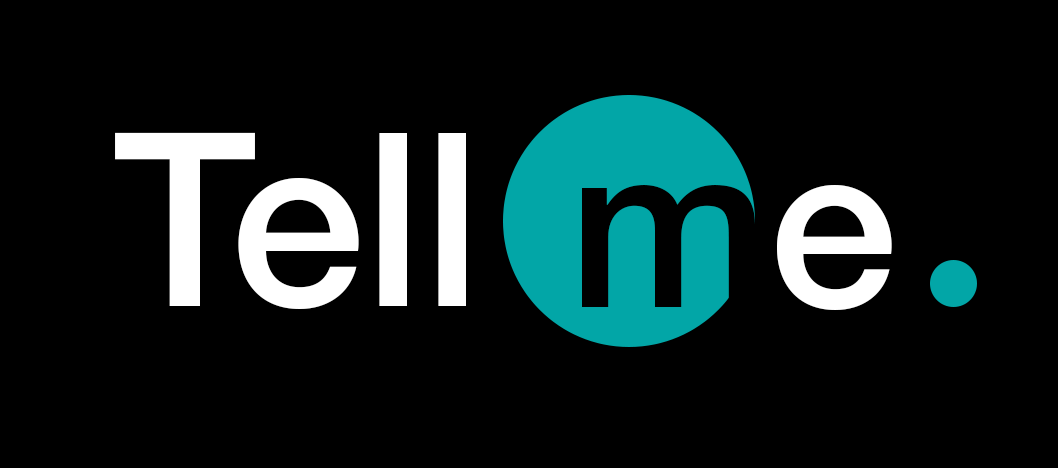
<style>
.page{position:relative;width:1058px;height:468px;background:#000000}
.page>*{position:absolute;margin:0}
.t1{font:242px "HelveticaNeueLTStd-Md";color:#ffffff}
.t2{font:231px "HelveticaNeueLTStd-Md";color:#000000}
.t3{font:231px "HelveticaNeueLTStd-Md";color:#ffffff}
</style>
<div class="page">
<p class="t1" style="left:115px;top:132px;width:351px;height:177px">Tell</p>
<p class="t2" style="left:582px;top:185px;width:310px;height:125px">m<span class="t3">e</span></p>
</div>
